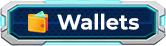
<style>
.page{position:relative;width:166px;height:46px}
.page>*{position:absolute;margin:0}
.t1{font:21px "Montserrat-Bold";color:#ffffff}
</style>
<div class="page">
<p class="t1" style="left:57px;top:13px;width:82px;height:17px">Wallets</p>
</div>
